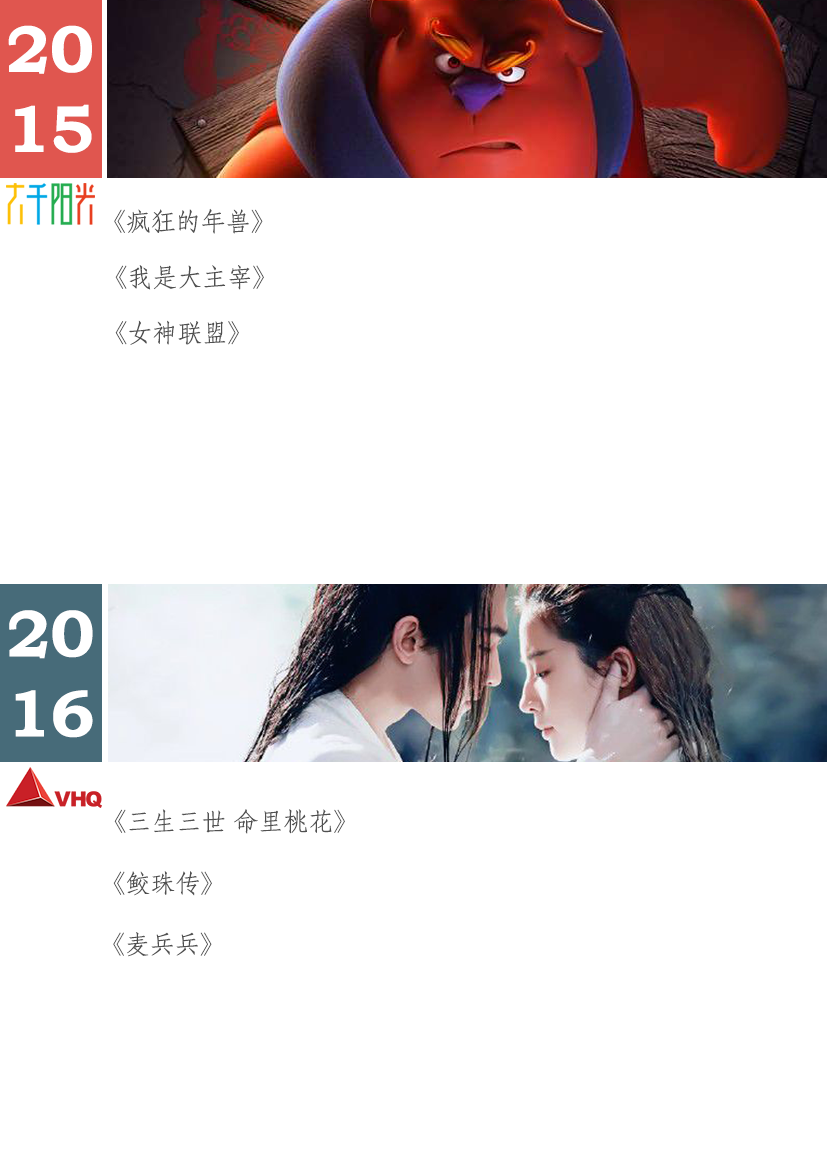
<style>
.page{position:relative;width:827px;height:1169px;background:#ffffff}
.page>*{position:absolute;margin:0}
.t1{font:66.7px "BookmanOldStyle-Bold";color:#ffffff}
.t2{font:25px "AdobeFangsongStd-Regular";color:#505050}
</style>
<div class="page">
<p class="t1" style="left:8px;top:25px;width:84px;height:128px">20<br>15</p>
<p class="t2" style="left:114px;top:208px;width:149px;height:26px">《疯狂的年兽》</p>
<p class="t2" style="left:115px;top:265px;width:149px;height:25px">《我是大主宰》</p>
<p class="t2" style="left:115px;top:320px;width:124px;height:25px">《女神联盟》</p>
<p class="t1" style="left:9px;top:610px;width:84px;height:128px">20<br>16</p>
<p class="t2" style="left:114px;top:809px;width:231px;height:25px">《三生三世 命里桃花》</p>
<p class="t2" style="left:113px;top:871px;width:99px;height:25px">《鲛珠传》</p>
<p class="t2" style="left:113px;top:932px;width:99px;height:25px">《麦兵兵》</p>
</div>
